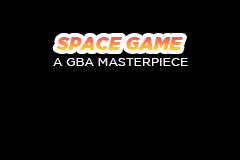
<style>
.page{position:relative;width:240px;height:160px;background:#000000}
.page>*{position:absolute;margin:0}
.t1{font:18px "GothamUltra-Italic";text-transform:uppercase}
.t2{font:12px "GothamBook";color:#ffffff;text-transform:uppercase}
</style>
<div class="page">
<p class="t1" style="left:56px;top:37px;width:127px;height:13px">Space Game</p>
<p class="t2" style="left:53px;top:58px;width:135px;height:8px">a gba masterpiece</p>
</div>
